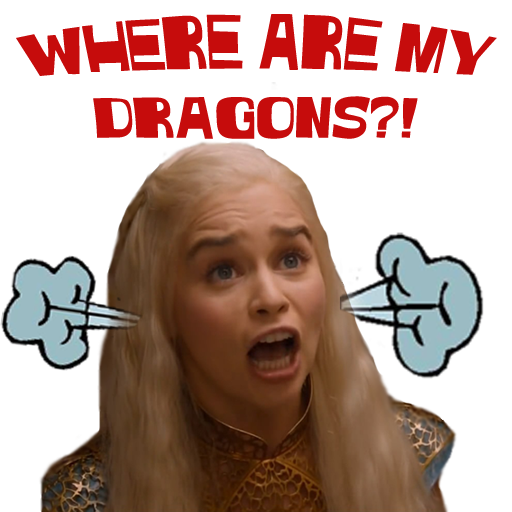
<style>
.page{position:relative;width:512px;height:512px;background:#ffffff}
.page>*{position:absolute;margin:0}
.t1{font:53px "Witless";color:#c60c0c}
</style>
<div class="page">
<p class="t1" style="left:16px;top:14px;width:481px;height:125px;text-align:center">WHERE ARE MY<br>DRAGONS?!</p>
</div>
